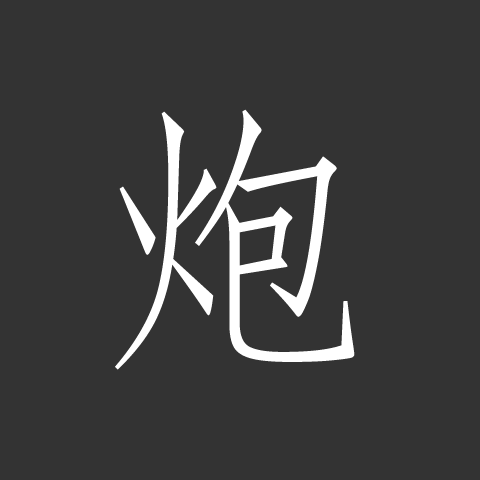
<style>
.page{position:relative;width:480px;height:480px;background:#333333}
.page>*{position:absolute;margin:0}
.t1{font:288px "STFangsong";color:#ffffff}
</style>
<div class="page">
<p class="t1" style="left:115px;top:109px;width:240px;height:261px">炮</p>
</div>
